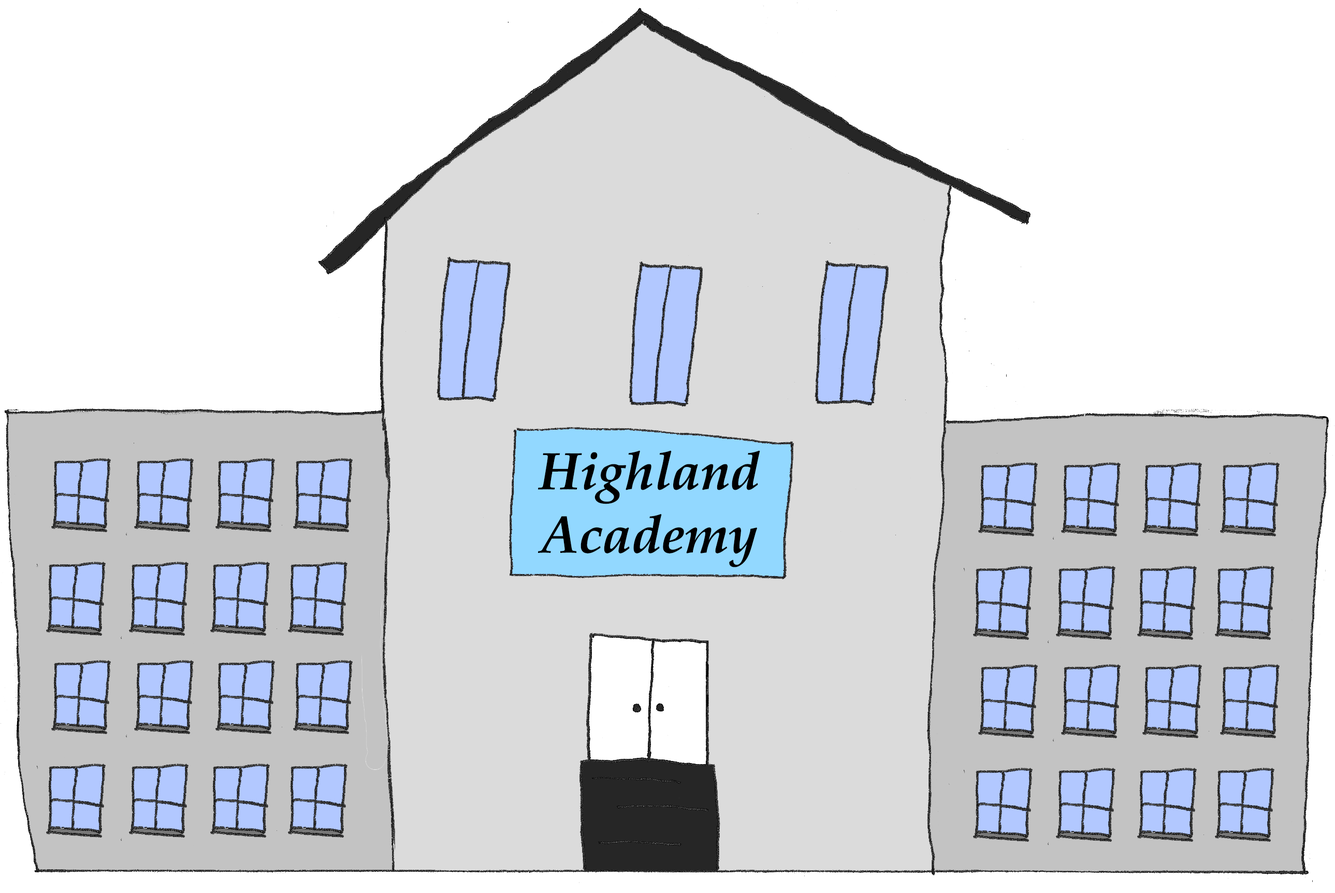
<style>
.page{position:relative;width:1335px;height:893px;background:#ffffff}
.page>*{position:absolute;margin:0}
.t1{font:52.8px "BookAntiqua-BoldItalic";color:#000000}
</style>
<div class="page">
<p class="t1" style="left:538px;top:451px;width:222px;height:117px;text-align:center">Highland<br>Academy</p>
</div>
